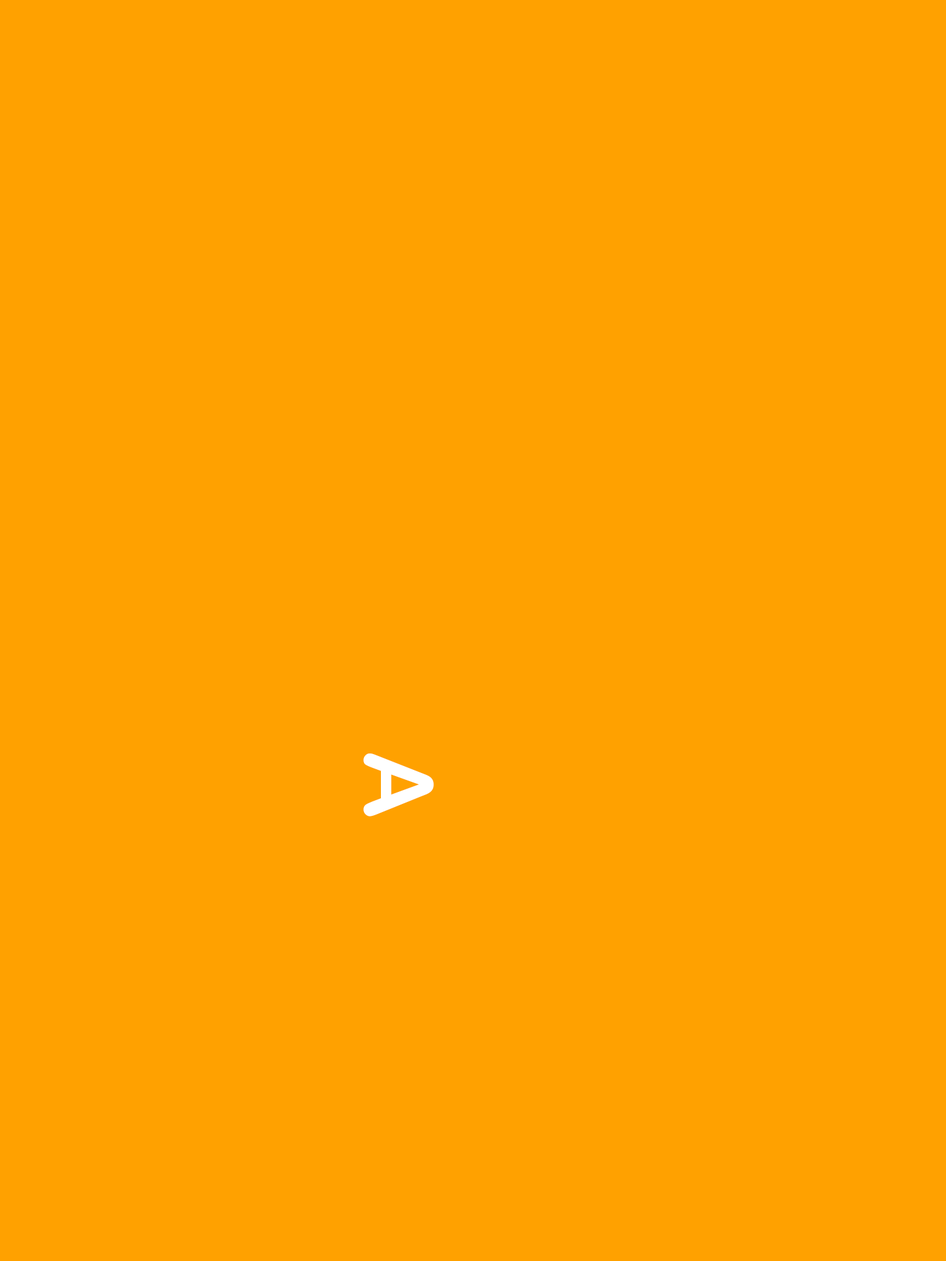
<style>
.page{position:relative;width:946px;height:1261px;background:#ffa100}
.page>*{position:absolute;margin:0}
.t1{font:94.6px "ArialRoundedMTBold";color:#ffffff}
</style>
<div class="page">
<p class="t1" style="left:363px;top:753px;width:71px;height:63px;rotate:90deg">A</p>
</div>
